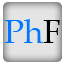
<style>
.page{position:relative;width:64px;height:64px;background:#e4e4e4}
.page>*{position:absolute;margin:0}
.t1{font:33px "PalatinoLinotype-Roman";color:#0078ff}
.t2{font:33px "PalatinoLinotype-Roman";color:#000000}
</style>
<div class="page">
<p class="t1" style="left:4px;top:19px;width:56px;height:24px">Ph<span class="t2">F</span></p>
</div>
